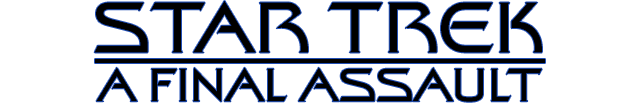
<style>
.page{position:relative;width:638px;height:104px;background:#ffffff}
.page>*{position:absolute;margin:0}
.t1{font:72px "StarTrekFilmBT-Regular";color:#000000}
.t2{font:47px "StarTrekFilmBT-Regular";color:#000000}
</style>
<div class="page">
<p class="t1" style="left:94px;top:1px;width:448px;height:52px">STAR TREK</p>
<p class="t2" style="left:96px;top:67px;width:446px;height:35px">A FINAL ASSAULT</p>
</div>
